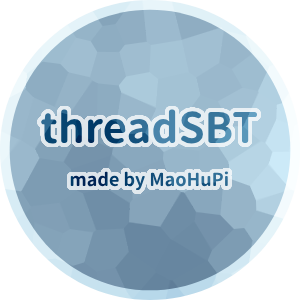
<style>
.page{position:relative;width:300px;height:300px;background:#ffffff}
.page>*{position:absolute;margin:0}
.t1{font:18px "GenJyuuGothic-Bold"}
.t2{font:42px "GenJyuuGothic-Bold"}
</style>
<div class="page">
<p class="t1" style="left:41px;top:109px;width:217px;height:82px;text-align:center"><span class="t2">threadSBT<br><br></span>made by MaoHuPi</p>
</div>
